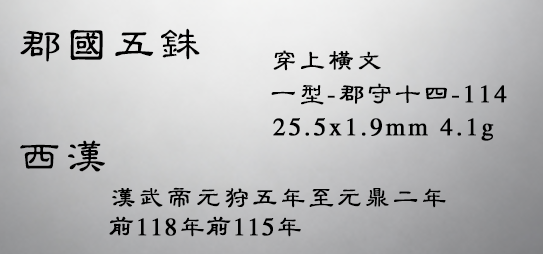
<style>
.page{position:relative;width:543px;height:254px}
.page>*{position:absolute;margin:0}
.t1{font:41.7px "CTLiShuSF";letter-spacing:0.1em;color:#000000;font-weight:bold}
.t2{font:25px "CTLiShuSF";letter-spacing:0.1em;color:#000000;font-weight:bold}
.t3{font:25px "CTLiShuSF";letter-spacing:0.05em;color:#000000;font-weight:bold}
</style>
<div class="page">
<p class="t1" style="left:20px;top:28px;width:180px;height:34px">郡国五铢</p>
<p class="t2" style="left:273px;top:50px;width:108px;height:21px">穿上横文</p>
<p class="t2" style="left:271px;top:83px;width:236px;height:22px">一型-郡守十四-114</p>
<p class="t2" style="left:273px;top:118px;width:221px;height:23px">25.5x1.9mm 4.1g</p>
<p class="t1" style="left:20px;top:140px;width:85px;height:32px">西汉</p>
<p class="t2" style="left:112px;top:187px;width:334px;height:21px">汉武帝元狩五年至元鼎二年</p>
<p class="t3" style="left:109px;top:216px;width:192px;height:21px">前118年前115年</p>
</div>
